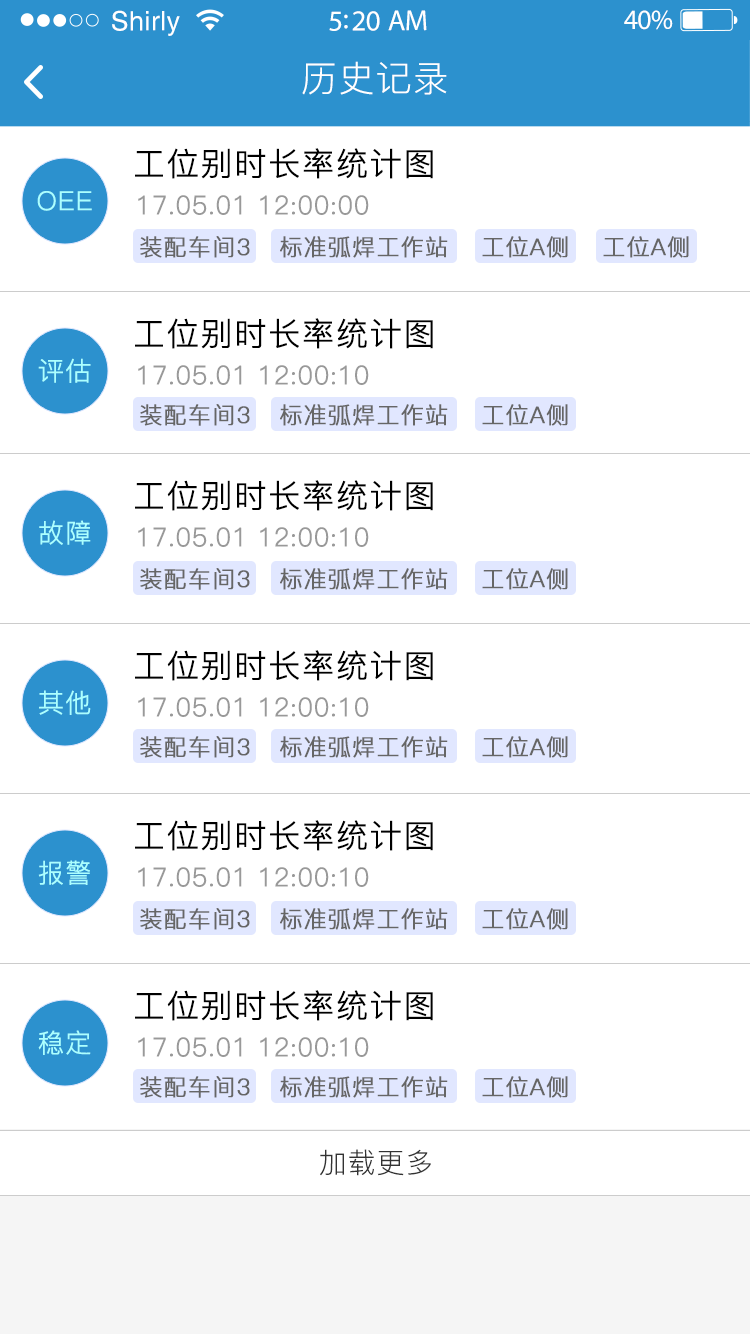
<style>
.page{position:relative;width:750px;height:1334px;background:#ffffff}
.page>*{position:absolute;margin:0}
.t1{font:26.8px "Helvetica";letter-spacing:0.02em;color:#ffffff}
.t2{font:29.1px "MyriadPro-Regular";letter-spacing:-0.02em;color:#ffffff}
.t3{font:27.9px "MyriadPro-Regular";letter-spacing:-0.02em;color:#ffffff}
.t4{font:36px "PingFang-SC-Regular";letter-spacing:0.03em;color:#ffffff}
.t5{font:32px "PingFang-SC-Regular";letter-spacing:0.03em;color:#000000;font-weight:bold}
.t6{font:26px "PingFang-SC-Regular";letter-spacing:0.03em;color:#abffff;font-weight:bold}
.t7{font:26px "PingFang-SC-Regular";color:#999999;font-weight:bold}
.t8{font:23px "PingFang-SC-Regular";letter-spacing:0.03em;color:#666666;font-weight:bold}
.t9{font:28px "PingFang-SC-Regular";letter-spacing:0.03em;color:#333333}
</style>
<div class="page">
<p class="t1" style="left:112px;top:10px;width:68px;height:26px">Shirly</p>
<p class="t2" style="left:329px;top:10px;width:98px;height:21px">5:20 AM</p>
<p class="t3" style="left:624px;top:10px;width:49px;height:20px">40%</p>
<p class="t4" style="left:302px;top:61px;width:145px;height:34px">历史记录</p>
<p class="t5" style="left:135px;top:148px;width:298px;height:31px">工位别时长率统计图</p>
<p class="t6" style="left:37px;top:191px;width:55px;height:20px">OEE</p>
<p class="t7" style="left:138px;top:195px;width:231px;height:20px">17.05.01 12:00:00</p>
<p class="t8" style="left:140px;top:236px;width:110px;height:22px">装配车间3</p>
<p class="t8" style="left:280px;top:236px;width:168px;height:22px">标准弧焊工作站</p>
<p class="t8" style="left:482px;top:236px;width:86px;height:22px">工位A侧</p>
<p class="t8" style="left:603px;top:236px;width:86px;height:22px">工位A侧</p>
<p class="t5" style="left:135px;top:318px;width:298px;height:31px">工位别时长率统计图</p>
<p class="t6" style="left:38px;top:358px;width:53px;height:25px">评估</p>
<p class="t7" style="left:138px;top:365px;width:231px;height:20px">17.05.01 12:00:10</p>
<p class="t8" style="left:140px;top:404px;width:110px;height:22px">装配车间3</p>
<p class="t8" style="left:280px;top:404px;width:168px;height:22px">标准弧焊工作站</p>
<p class="t8" style="left:482px;top:404px;width:86px;height:22px">工位A侧</p>
<p class="t5" style="left:135px;top:480px;width:298px;height:31px">工位别时长率统计图</p>
<p class="t6" style="left:39px;top:520px;width:52px;height:25px">故障</p>
<p class="t7" style="left:138px;top:527px;width:231px;height:20px">17.05.01 12:00:10</p>
<p class="t8" style="left:140px;top:568px;width:110px;height:22px">装配车间3</p>
<p class="t8" style="left:280px;top:568px;width:168px;height:22px">标准弧焊工作站</p>
<p class="t8" style="left:482px;top:568px;width:86px;height:22px">工位A侧</p>
<p class="t5" style="left:135px;top:650px;width:298px;height:31px">工位别时长率统计图</p>
<p class="t6" style="left:39px;top:690px;width:52px;height:25px">其他</p>
<p class="t7" style="left:138px;top:697px;width:231px;height:20px">17.05.01 12:00:10</p>
<p class="t8" style="left:140px;top:736px;width:110px;height:22px">装配车间3</p>
<p class="t8" style="left:280px;top:736px;width:168px;height:22px">标准弧焊工作站</p>
<p class="t8" style="left:482px;top:736px;width:86px;height:22px">工位A侧</p>
<p class="t5" style="left:135px;top:820px;width:298px;height:31px">工位别时长率统计图</p>
<p class="t6" style="left:38px;top:860px;width:52px;height:25px">报警</p>
<p class="t7" style="left:138px;top:867px;width:231px;height:20px">17.05.01 12:00:10</p>
<p class="t8" style="left:140px;top:908px;width:110px;height:22px">装配车间3</p>
<p class="t8" style="left:280px;top:908px;width:168px;height:22px">标准弧焊工作站</p>
<p class="t8" style="left:482px;top:908px;width:86px;height:22px">工位A侧</p>
<p class="t5" style="left:135px;top:990px;width:298px;height:31px">工位别时长率统计图</p>
<p class="t6" style="left:38px;top:1030px;width:53px;height:25px">稳定</p>
<p class="t7" style="left:138px;top:1037px;width:231px;height:20px">17.05.01 12:00:10</p>
<p class="t8" style="left:140px;top:1076px;width:110px;height:22px">装配车间3</p>
<p class="t8" style="left:280px;top:1076px;width:168px;height:22px">标准弧焊工作站</p>
<p class="t8" style="left:482px;top:1076px;width:86px;height:22px">工位A侧</p>
<p class="t9" style="left:320px;top:1149px;width:111px;height:27px">加载更多</p>
</div>
